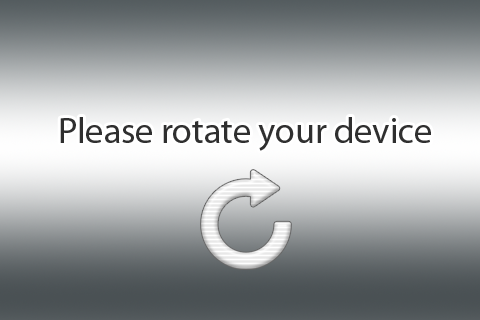
<style>
.page{position:relative;width:480px;height:320px}
.page>*{position:absolute;margin:0}
.t1{font:36px "MyriadPro-Regular";color:#2f2f2f}
</style>
<div class="page">
<p class="t1" style="left:60px;top:117px;width:371px;height:34px">Please rotate your device</p>
</div>
